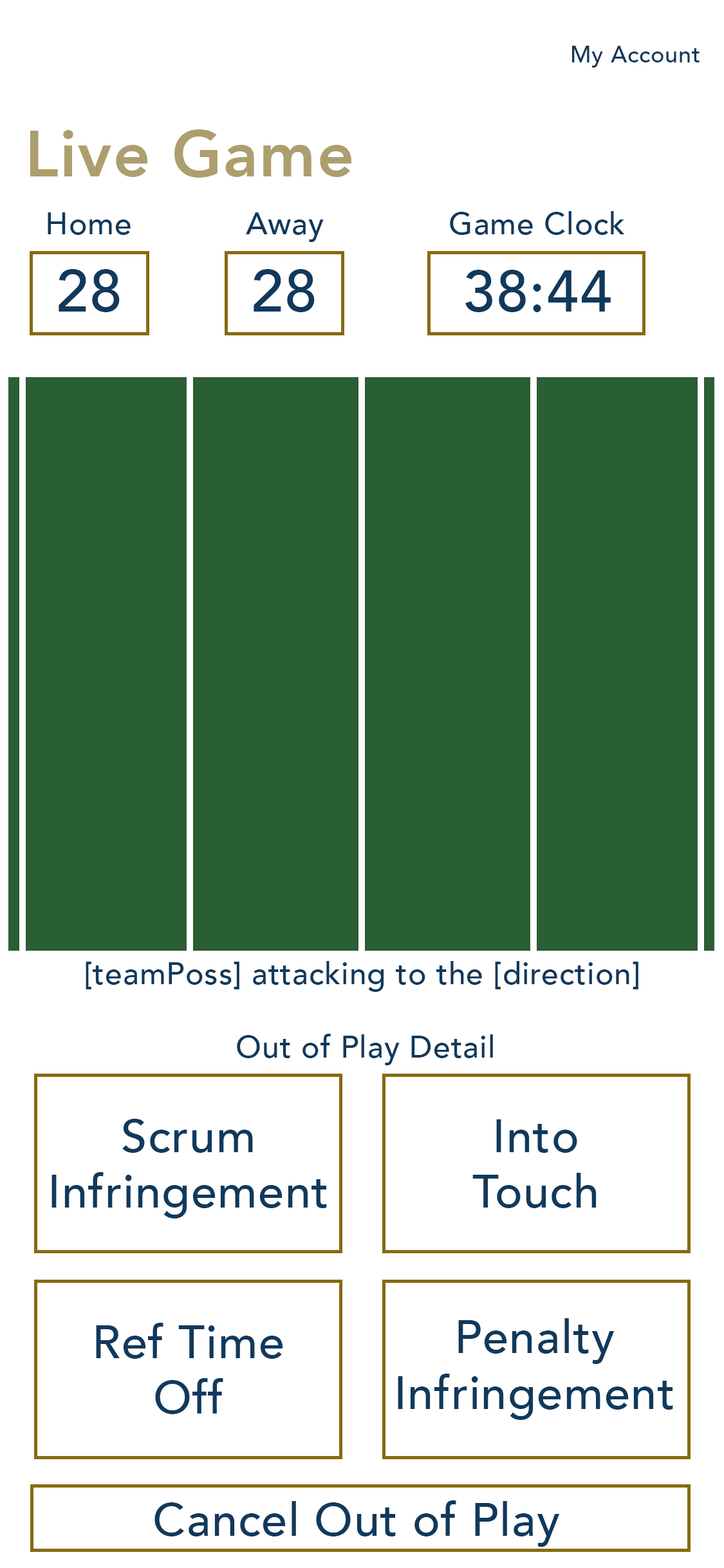
<style>
.page{position:relative;width:724px;height:1568px;background:#ffffff}
.page>*{position:absolute;margin:0}
.t1{font:23.2px "Avenir-Medium";letter-spacing:0.021em;color:#10395c}
.t2{font:64.6px "Avenir-Heavy";letter-spacing:0.021em;color:#ad9e6e}
.t3{font:30.9px "Avenir-Medium";letter-spacing:0.021em;color:#10395c}
.t4{font:58.4px "Avenir-Medium";letter-spacing:0.021em;color:#10395c}
.t5{font:57.9px "Avenir-Medium";letter-spacing:0.021em;color:#10395c}
.t6{font:46.3px "Avenir-Medium";letter-spacing:0.021em;color:#10395c}
</style>
<div class="page">
<p class="t1" style="left:572px;top:46px;width:128px;height:22px">My Account</p>
<p class="t2" style="left:30px;top:129px;width:321px;height:49px">Live Game</p>
<p class="t3" style="left:48px;top:212px;width:83px;height:23px">Home</p>
<p class="t3" style="left:246px;top:212px;width:78px;height:30px">Away</p>
<p class="t3" style="left:450px;top:211px;width:175px;height:24px">Game Clock</p>
<p class="t4" style="left:59px;top:269px;width:61px;height:43px">28</p>
<p class="t4" style="left:254px;top:269px;width:61px;height:43px">28</p>
<p class="t5" style="left:465px;top:270px;width:146px;height:42px">38:44</p>
<p class="t3" style="left:86px;top:961px;width:553px;height:31px">[teamPoss] attacking to the [direction]</p>
<p class="t3" style="left:237px;top:1034px;width:256px;height:31px">Out of Play Detail</p>
<p class="t6" style="left:51px;top:1119px;width:276px;height:99px;text-align:center">Scrum<br>Infringement</p>
<p class="t6" style="left:472px;top:1119px;width:125px;height:89px;text-align:center">Into<br>Touch</p>
<p class="t6" style="left:96px;top:1323px;width:187px;height:91px;text-align:center">Ref Time<br>Off</p>
<p class="t6" style="left:398px;top:1318px;width:275px;height:102px;text-align:center">Penalty<br>Infringement</p>
<p class="t6" style="left:154px;top:1500px;width:406px;height:47px">Cancel Out of Play</p>
</div>
